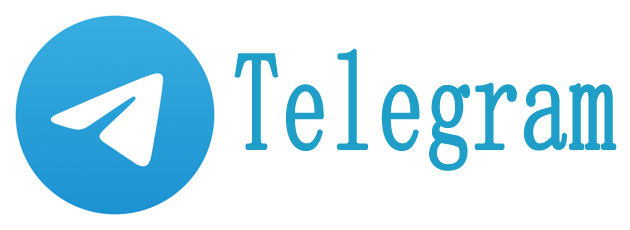
<style>
.page{position:relative;width:630px;height:230px;background:#ffffff}
.page>*{position:absolute;margin:0}
.t1{font:240px "SimSun";color:#1f9ec8;font-weight:bold;scale:0.65 1}
</style>
<div class="page">
<p class="t1" style="left:234px;top:48px;width:383px;height:123px">Telegram</p>
</div>
